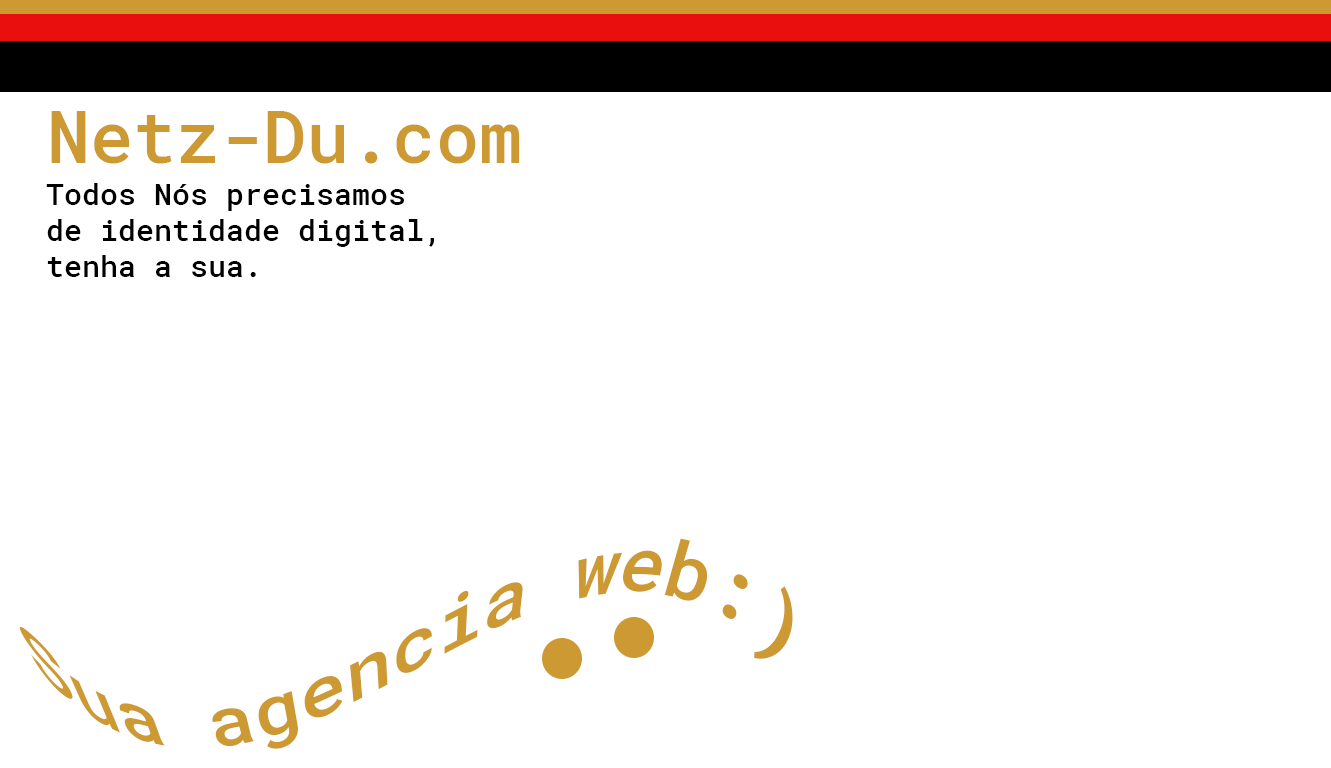
<style>
.page{position:relative;width:1331px;height:768px;background:#ffffff}
.page>*{position:absolute;margin:0}
.t1{font:72px "RobotoMonoForPowerline-Medium";color:#cc9933}
.t2{font:30px "RobotoMonoForPowerline-Medium";color:#000000}
</style>
<div class="page">
<p class="t1" style="left:51px;top:111px;width:469px;height:53px">Netz-Du.com</p>
<p class="t2" style="left:46px;top:183px;width:388px;height:94px">Todos Nós precisamos<br>de identidade digital,<br>tenha a sua.</p>
<p class="t1" style="left:19px;top:538px;width:774px;height:211px;text-align:center">Sua agencia web:)</p>
</div>
